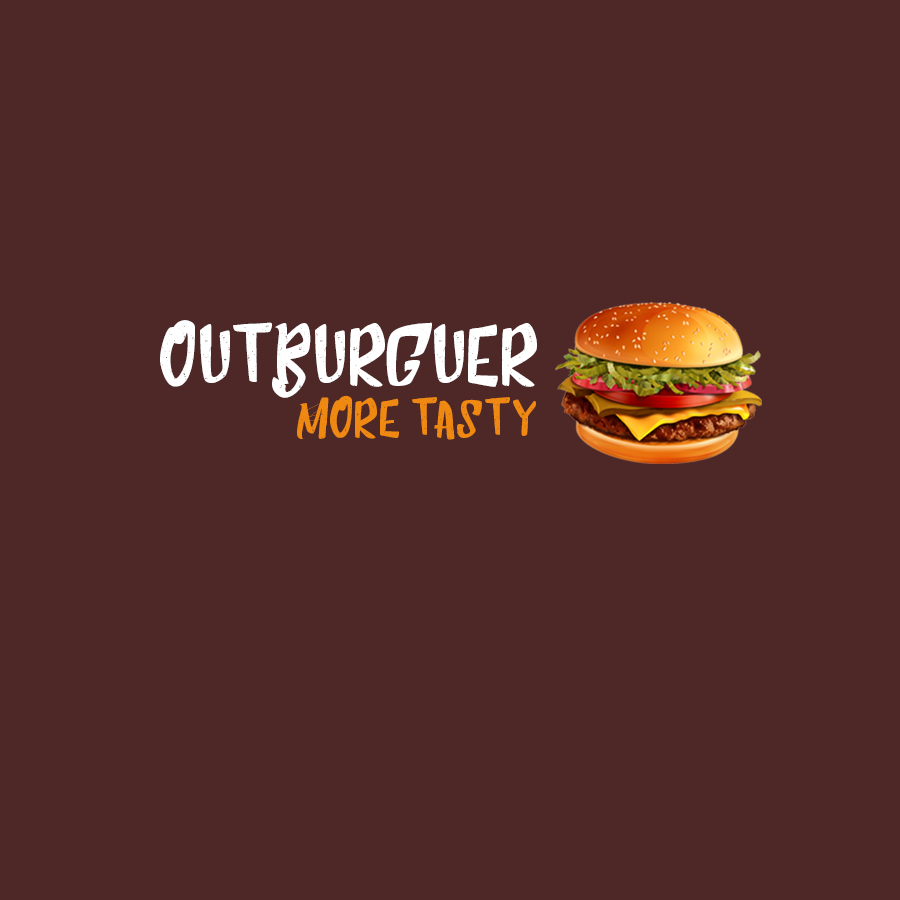
<style>
.page{position:relative;width:900px;height:900px;background:#4e2727}
.page>*{position:absolute;margin:0}
.t1{font:78.4px "HumblleRoughtAllCaps";color:#ffffff}
.t2{font:50.1px "HumblleRoughtAllCaps";color:#ef8911}
</style>
<div class="page">
<p class="t1" style="left:160px;top:320px;width:377px;height:78px">OutBurguer</p>
<p class="t2" style="left:297px;top:395px;width:239px;height:45px">More tasty</p>
</div>
